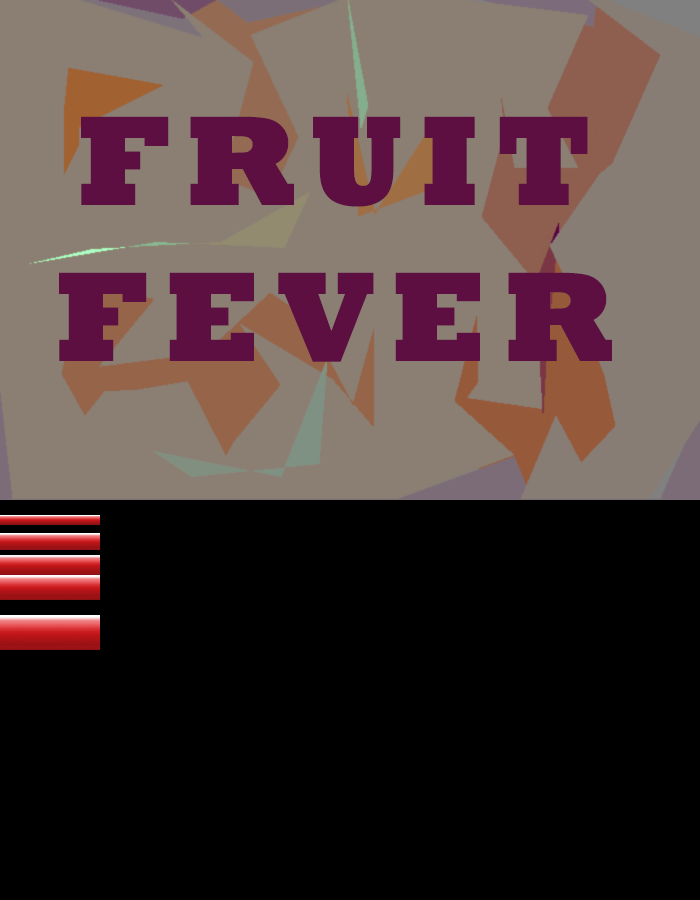
<style>
.page{position:relative;width:700px;height:900px;background:#000000}
.page>*{position:absolute;margin:0}
.t1{font:130px "Rockwell-ExtraBold";letter-spacing:0.12em;color:#5d0f42}
</style>
<div class="page">
<p class="t1" style="left:59px;top:116px;width:553px;height:246px;text-align:center">FRUIT<br>FEVER</p>
</div>
